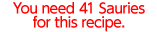
<style>
.page{position:relative;width:157px;height:32px;background:#ffffff}
.page>*{position:absolute;margin:0}
.t1{font:14px/14px "UDShinGoPro-Medium";letter-spacing:-0.04em;color:#ff0000}
</style>
<div class="page">
<p class="t1" style="left:13px;top:2px;width:132px;height:30px;text-align:center">You need 41 Sauries<br>for this recipe.</p>
</div>
